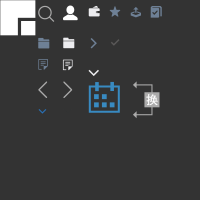
<style>
.page{position:relative;width:200px;height:200px;background:#333333}
.page>*{position:absolute;margin:0}
.t1{font:12px "SimHei";color:#ffffff}
</style>
<div class="page">
<p class="t1" style="left:146px;top:94px;width:12px;height:12px">换</p>
</div>
